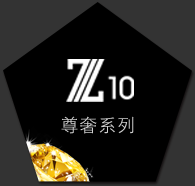
<style>
.page{position:relative;width:195px;height:186px;background:#000000}
.page>*{position:absolute;margin:0}
.t1{font:18px "STXihei";letter-spacing:0.05em;color:#d0d0d0}
</style>
<div class="page">
<p class="t1" style="left:61px;top:116px;width:73px;height:18px">尊奢系列</p>
</div>
